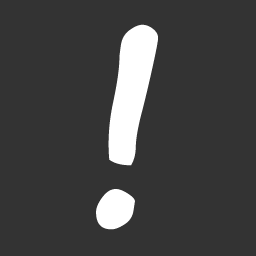
<style>
.page{position:relative;width:256px;height:256px;background:#333333}
.page>*{position:absolute;margin:0}
.t1{font:284.7px "SegoePrint-Bold";color:#ffffff}
</style>
<div class="page">
<p class="t1" style="left:96px;top:24px;width:62px;height:206px">!</p>
</div>
